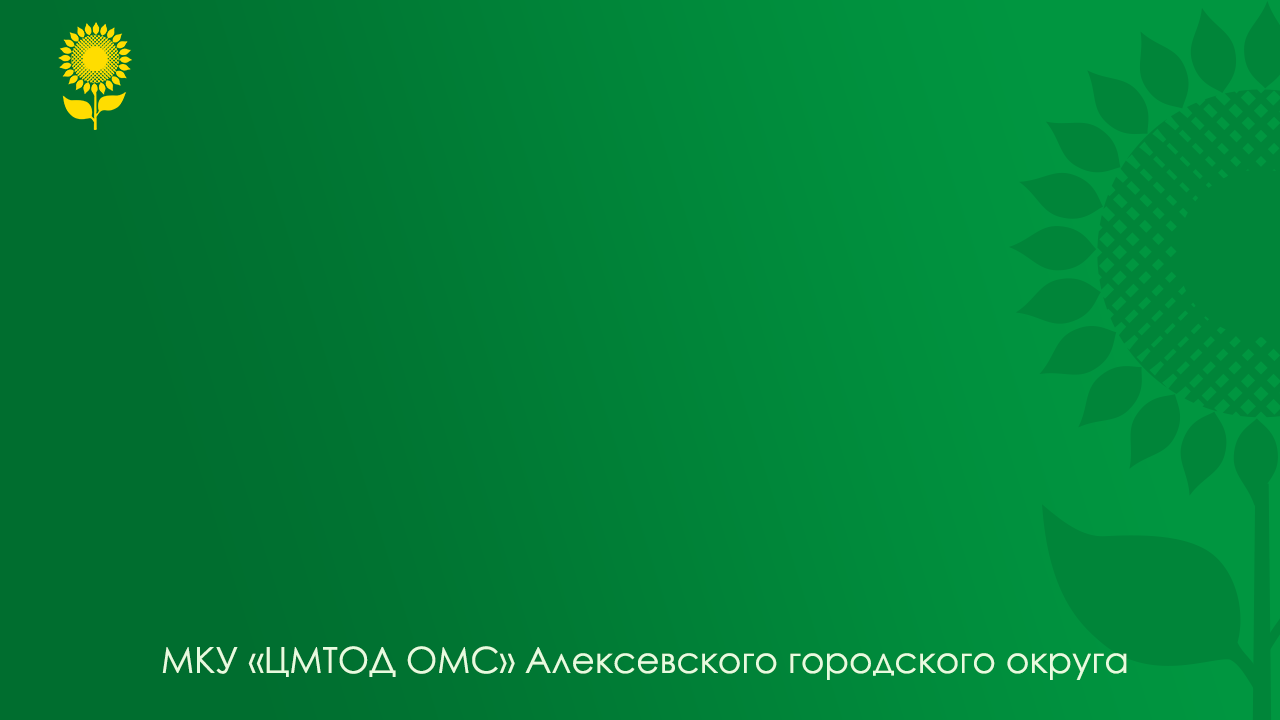
<style>
.page{position:relative;width:1280px;height:720px}
.page>*{position:absolute;margin:0}
.t1{font:36px "CenturyGothic";color:#e7fbdf}
</style>
<div class="page">
<p class="t1" style="left:162px;top:646px;width:965px;height:34px">МКУ «ЦМТОД ОМС» Алексевского городского округа</p>
</div>
